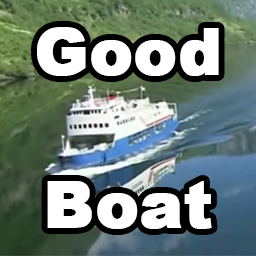
<style>
.page{position:relative;width:256px;height:256px}
.page>*{position:absolute;margin:0}
.t1{font:64px "Arial-Black";color:#ffffff;font-weight:bold}
</style>
<div class="page">
<p class="t1" style="left:37px;top:27px;width:182px;height:202px;text-align:center">Good<br><br>Boat</p>
</div>
